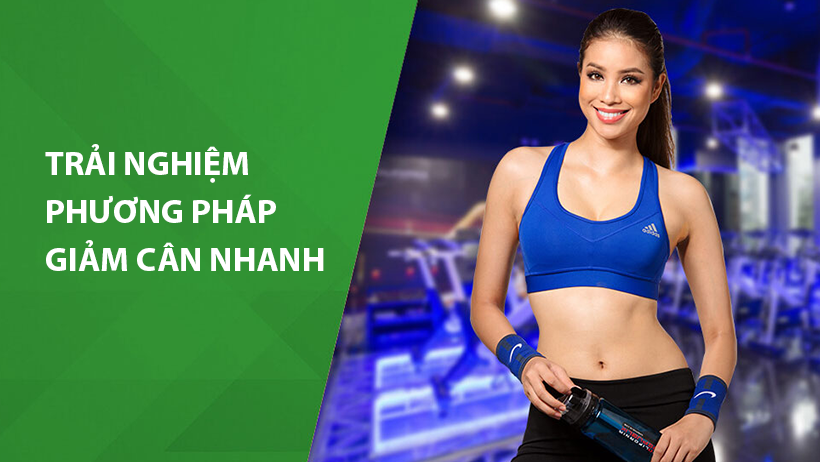
<style>
.page{position:relative;width:820px;height:462px}
.page>*{position:absolute;margin:0}
.t1{font:34px/48px "MyriadPro-Bold";color:#ffffff}
</style>
<div class="page">
<p class="t1" style="left:45px;top:144px;width:279px;height:127px">TRẢI NGHIỆM PHƯƠNG PHÁP<br>GIẢM CÂN NHANH</p>
</div>
